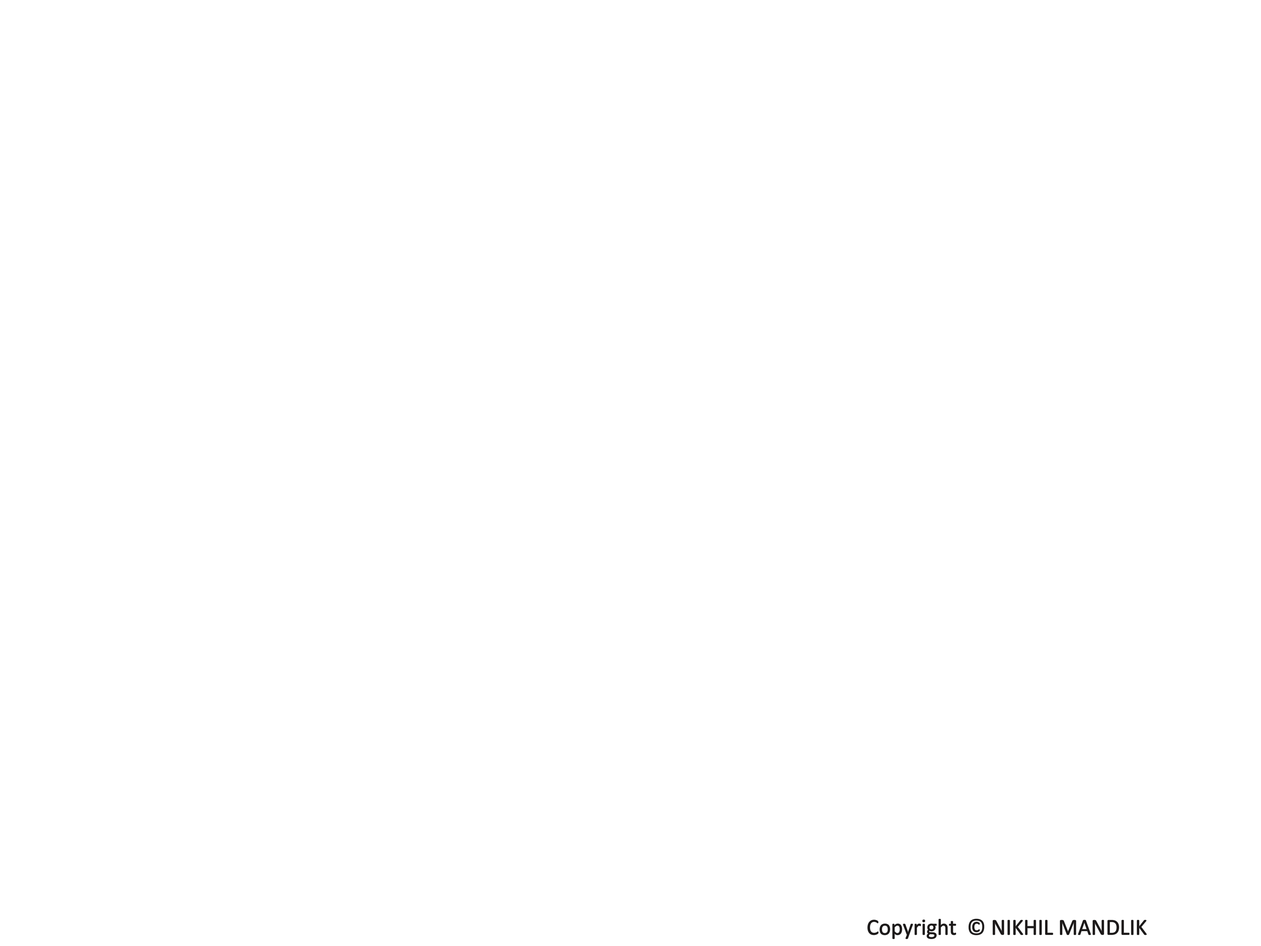
<style>
.page{position:relative;width:1261px;height:946px;background:#ffffff}
.page>*{position:absolute;margin:0}
.t1{font:22.9px "Calibri";color:#1b1818}
</style>
<div class="page">
<p class="t1" style="left:868px;top:919px;width:278px;height:19px">Copyright  © NIKHIL MANDLIK</p>
<p class="t1" style="left:868px;top:919px;width:278px;height:19px">Copyright  © NIKHIL MANDLIK</p>
</div>
